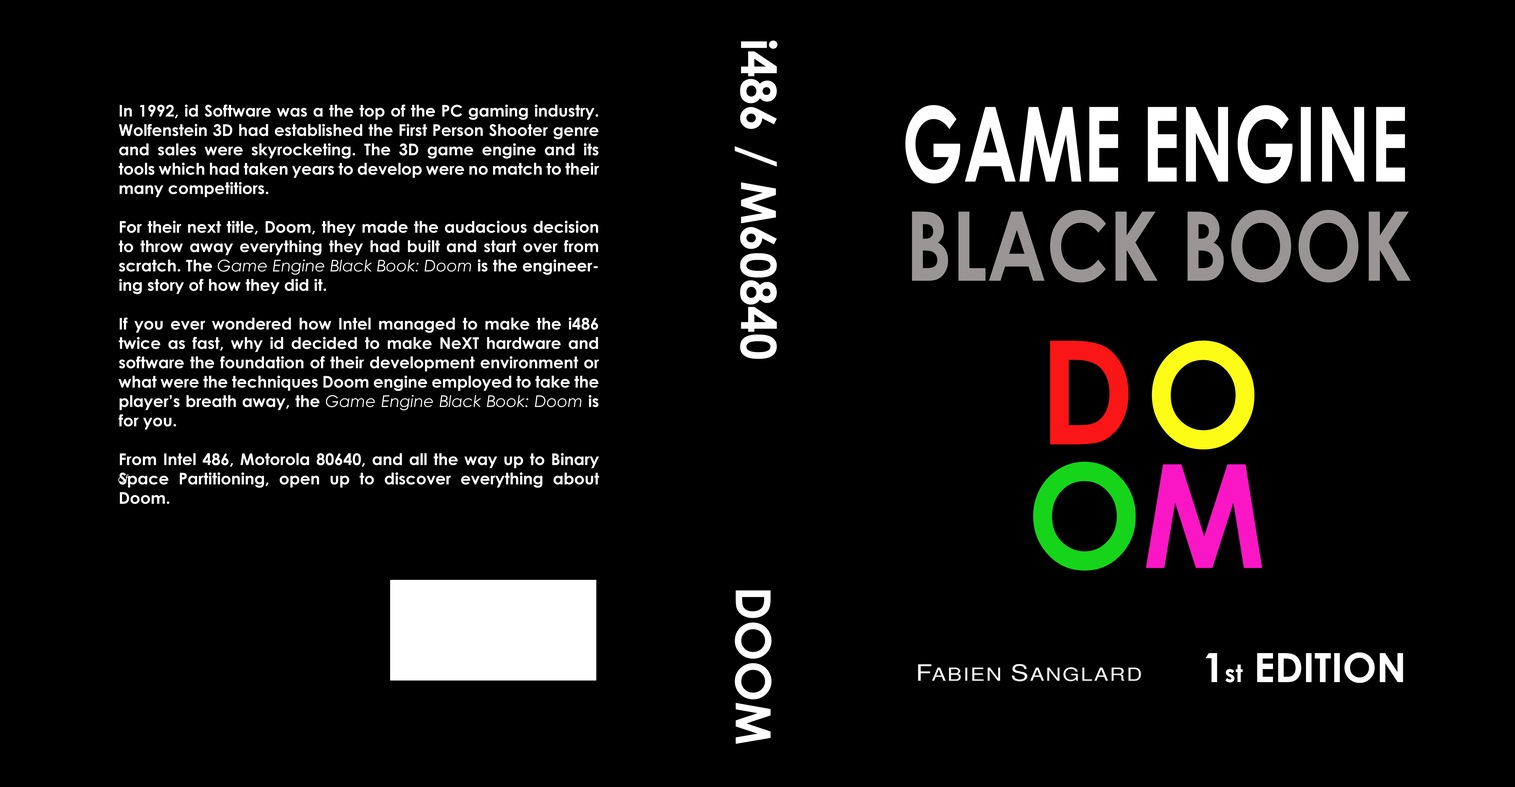
<style>
.page{position:relative;width:1515px;height:787px;background:#000000}
.page>*{position:absolute;margin:0}
.t1{font:48.4px "CenturyGothic-Bold";color:#ffffff}
.t2{font:16.1px "CenturyGothic-Bold";color:#ffffff}
.t3{font:16.1px "CenturyGothic-Italic";color:#ffffff}
.t4{font:103.8px "CenturyGothic-Bold";color:#ffffff;scale:0.71 1}
.t5{font:96.2px "CenturyGothic-Bold";color:#999595;scale:0.83 1}
.t6{font:144.2px "CenturyGothic-Bold";color:#fa1516;scale:0.95 1}
.t7{font:144.2px "CenturyGothic-Bold";color:#fcfc17;scale:0.95 1}
.t8{font:144.2px "CenturyGothic-Bold";color:#16d41a;scale:0.95 1}
.t9{font:144.2px "CenturyGothic-Bold";color:#fb16c5;scale:0.95 1}
.t10{font:10.8px "CenturyGothic-Italic";color:#ffffff}
.t11{font:40.3px "CenturyGothic-Bold";color:#ffffff}
.t12{font:24.2px "CenturyGothic-Bold";color:#ffffff}
</style>
<div class="page">
<p class="t1" style="left:735px;top:40px;width:43px;height:319px;rotate:90deg">i486 / M60840</p>
<p class="t2" style="left:118px;top:105px;width:481px;height:399px;text-align:justify">In 1992, id Software was a the top of the PC gaming industry. Wolfenstein 3D had established the First Person Shooter genre and sales were skyrocketing. The 3D game engine and its tools which had taken years to develop were no match to their many competitiors.<br><br>For their next title, Doom, they made the audacious decision to throw away everything they had built and start over from scratch. The <span class="t3">Game Engine Black Book: Doom</span> is the engineering story of how they did it.<br><br>If you ever wondered how Intel managed to make the i486 twice as fast, why id decided to make NeXT hardware and software the foundation of their development environment or what were the techniques Doom engine employed to take the player’s breath away, the <span class="t3">Game Engine Black Book: Doom</span> is for you.<br><br>From Intel 486, Motorola 80640, and all the way up to Binary Space Partitioning, open up to discover everything about  Doom.</p>
<p class="t4" style="left:905px;top:105px;width:500px;height:79px">GAME ENGINE</p>
<p class="t5" style="left:912px;top:210px;width:499px;height:73px">BLACK BOOK</p>
<p class="t6" style="left:1050px;top:341px;width:78px;height:104px">D</p>
<p class="t7" style="left:1152px;top:340px;width:103px;height:110px">O</p>
<p class="t8" style="left:1033px;top:462px;width:103px;height:109px">O</p>
<p class="t9" style="left:1146px;top:464px;width:116px;height:104px">M</p>
<p class="t10" style="left:118px;top:474px;width:11px;height:9px">of</p>
<p class="t1" style="left:735px;top:590px;width:37px;height:154px;rotate:90deg">DOOM</p>
<p class="t11" style="left:1206px;top:652px;width:197px;height:31px">1<span class="t12">st</span> EDITION</p>
</div>
